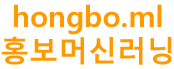
<style>
.page{position:relative;width:174px;height:69px;background:#ffffff}
.page>*{position:absolute;margin:0}
.t1{font:29.3px "MalgunGothicBold";color:#ff9900}
</style>
<div class="page">
<p class="t1" style="left:1px;top:4px;width:171px;height:61px;text-align:center">hongbo.ml<br>홍보머신러닝</p>
</div>
